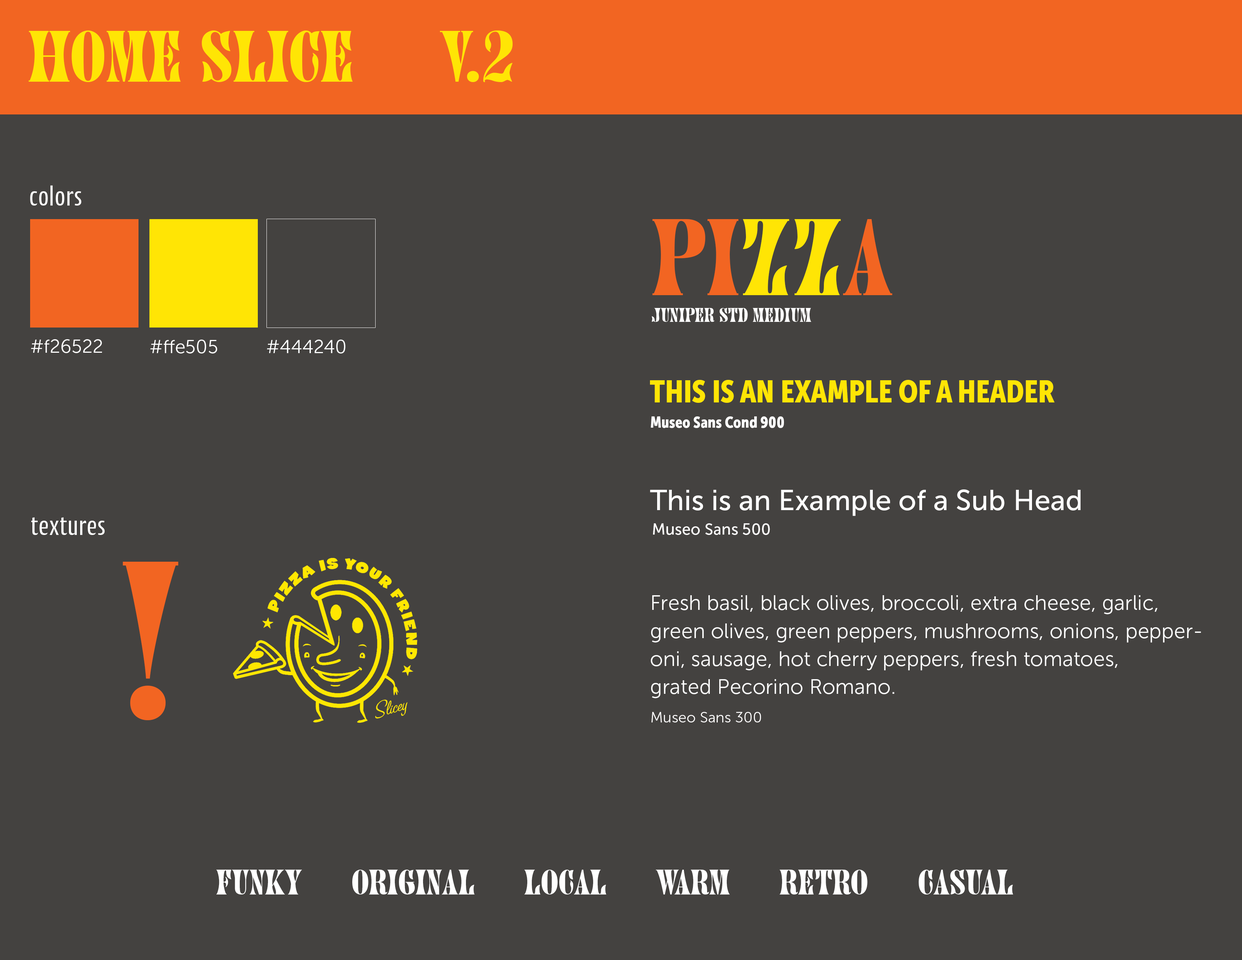
<style>
.page{position:relative;width:1242px;height:960px;background:#444240}
.page>*{position:absolute;margin:0}
.t1{font:67.7px "JuniperStd";color:#ffe505}
.t2{font:28.2px "CantigaCnd";color:#fdfcfc}
.t3{font:101.3px "JuniperStd";color:#f26522}
.t4{font:101.3px "JuniperStd";color:#ffe505}
.t5{font:18.4px "JuniperStd";color:#ffffff}
.t6{font:18.8px "MuseoSans-300";color:#fefefe}
.t7{font:18.8px "MuseoSans-300";color:#ffffff}
.t8{font:18.8px "MuseoSans-300";color:#fdffff}
.t9{font:30.8px "MuseoSansCond-900";color:#ffe505}
.t10{font:15.8px "MuseoSansCond-900";color:#fefefe}
.t11{font:28.6px "MuseoSans-500";color:#ffffff}
.t12{font:28.2px "CantigaCnd";color:#ffffff}
.t13{font:15.8px "MuseoSans-500";color:#fffefe}
.t14{font:210.4px "JuniperStd";color:#f26522}
.t15{font:20.9px/28px "MuseoSans-300";color:#fefefe}
.t16{font:14.9px "MuseoSans-300";color:#fffefe}
.t17{font:33.1px "JuniperStd";color:#ffffff}
</style>
<div class="page">
<p class="t1" style="left:29px;top:30px;width:484px;height:52px">home slice     v.2</p>
<p class="t2" style="left:30px;top:185px;width:51px;height:21px">colors</p>
<p class="t3" style="left:652px;top:219px;width:241px;height:76px">PI<span class="t4">ZZ</span>A</p>
<p class="t5" style="left:652px;top:308px;width:160px;height:14px">Juniper Std Medium</p>
<p class="t6" style="left:31px;top:339px;width:71px;height:14px">#f26522</p>
<p class="t7" style="left:150px;top:340px;width:67px;height:13px">#ffe505</p>
<p class="t8" style="left:267px;top:340px;width:79px;height:13px">#444240</p>
<p class="t9" style="left:650px;top:380px;width:405px;height:23px">THIS IS AN EXAMPLE OF A HEADER</p>
<p class="t10" style="left:651px;top:416px;width:133px;height:12px">Museo Sans Cond 900</p>
<p class="t11" style="left:650px;top:489px;width:431px;height:27px">This is an Example of a Sub Head</p>
<p class="t12" style="left:31px;top:517px;width:74px;height:18px">textures</p>
<p class="t13" style="left:653px;top:523px;width:117px;height:12px">Museo Sans 500</p>
<p class="t14" style="left:123px;top:562px;width:55px;height:158px">!</p>
<p class="t15" style="left:651px;top:595px;width:550px;height:103px">Fresh basil, black olives, broccoli, extra cheese, garlic, green olives, green peppers, mushrooms, onions, pepperoni, sausage, hot cherry peppers, fresh tomatoes,<br>grated Pecorino Romano.</p>
<p class="t16" style="left:652px;top:712px;width:109px;height:10px">Museo Sans 300</p>
<p class="t17" style="left:216px;top:870px;width:797px;height:24px">FUNKY      ORIGINAL      LOCAL      WARM      RETRO      CASUAL</p>
</div>
